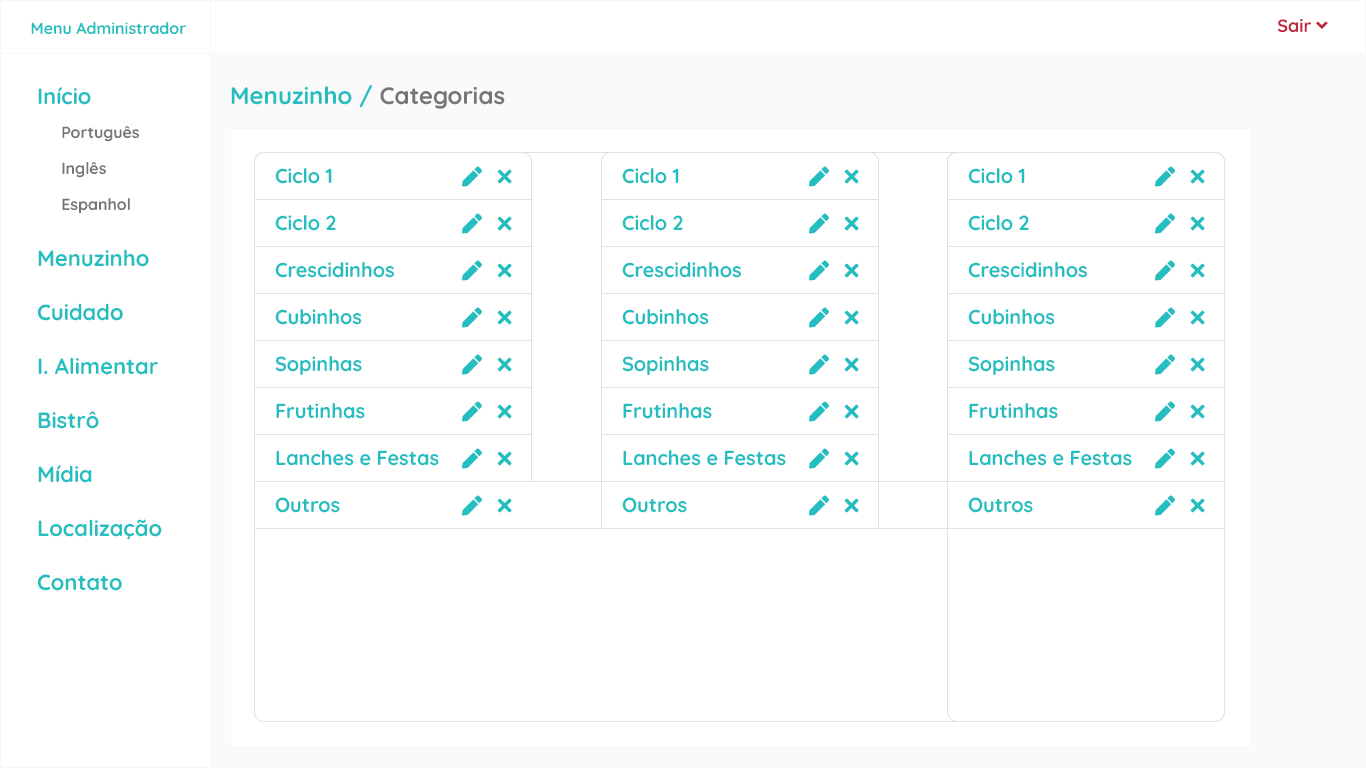
<style>
.page{position:relative;width:1366px;height:768px;background:#ffffff}
.page>*{position:absolute;margin:0}
.t1{font:16px "Quicksand-Bold";color:#24bec0}
.t2{font:22px/54px "Quicksand-Bold";color:#24bec0}
.t3{font:24px "Quicksand-Bold";color:#24bec0}
.t4{font:24px "Quicksand-Bold";color:#767676}
.t5{font:16px/36px "Quicksand-Bold";color:#767676}
.t6{font:20px "Quicksand-Bold";color:#24bec0}
</style>
<div class="page">
<p class="t1" style="left:31px;top:22px;width:155px;height:13px">Menu Administrador</p>
<p class="t2" style="left:38px;top:87px;width:124px;height:504px">Início <br><br><br>Menuzinho<br>Cuidado<br>I. Alimentar<br>Bistrô<br>Mídia<br>Localização<br>Contato</p>
<p class="t3" style="left:231px;top:85px;width:274px;height:24px">Menuzinho / <span class="t4">Categorias</span></p>
<p class="t5" style="left:62px;top:126px;width:77px;height:88px">Português<br>Inglês<br>Espanhol</p>
<p class="t6" style="left:275px;top:168px;width:57px;height:16px">Ciclo 1</p>
<p class="t6" style="left:622px;top:168px;width:57px;height:16px">Ciclo 1</p>
<p class="t6" style="left:968px;top:168px;width:57px;height:16px">Ciclo 1</p>
<p class="t6" style="left:275px;top:215px;width:61px;height:16px">Ciclo 2</p>
<p class="t6" style="left:622px;top:215px;width:61px;height:16px">Ciclo 2</p>
<p class="t6" style="left:968px;top:215px;width:61px;height:16px">Ciclo 2</p>
<p class="t6" style="left:275px;top:262px;width:119px;height:16px">Crescidinhos</p>
<p class="t6" style="left:622px;top:262px;width:119px;height:16px">Crescidinhos</p>
<p class="t6" style="left:968px;top:262px;width:119px;height:16px">Crescidinhos</p>
<p class="t6" style="left:275px;top:309px;width:87px;height:16px">Cubinhos</p>
<p class="t6" style="left:622px;top:309px;width:87px;height:16px">Cubinhos</p>
<p class="t6" style="left:968px;top:309px;width:87px;height:16px">Cubinhos</p>
<p class="t6" style="left:275px;top:356px;width:87px;height:19px">Sopinhas</p>
<p class="t6" style="left:622px;top:356px;width:87px;height:19px">Sopinhas</p>
<p class="t6" style="left:968px;top:356px;width:87px;height:19px">Sopinhas</p>
<p class="t6" style="left:276px;top:403px;width:89px;height:16px">Frutinhas</p>
<p class="t6" style="left:623px;top:403px;width:89px;height:16px">Frutinhas</p>
<p class="t6" style="left:969px;top:403px;width:89px;height:16px">Frutinhas</p>
<p class="t6" style="left:276px;top:450px;width:163px;height:16px">Lanches e Festas</p>
<p class="t6" style="left:623px;top:450px;width:163px;height:16px">Lanches e Festas</p>
<p class="t6" style="left:969px;top:450px;width:163px;height:16px">Lanches e Festas</p>
<p class="t6" style="left:275px;top:497px;width:65px;height:16px">Outros</p>
<p class="t6" style="left:622px;top:497px;width:65px;height:16px">Outros</p>
<p class="t6" style="left:968px;top:497px;width:65px;height:16px">Outros</p>
</div>
